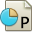
<style>
.page{position:relative;width:32px;height:32px}
.page>*{position:absolute;margin:0}
.t1{font:18px "Consolas";color:#000000}
</style>
<div class="page">
<p class="t1" style="left:21px;top:16px;width:8px;height:13px">P</p>
</div>
